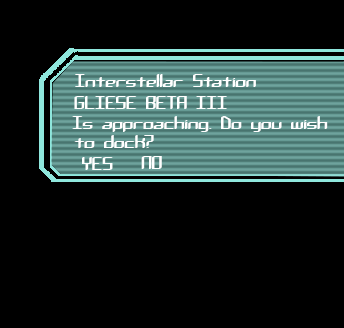
<style>
.page{position:relative;width:344px;height:328px;background:#000000}
.page>*{position:absolute;margin:0}
.t1{font:18px "ChemicalReactionABRK";color:#ffffff}
</style>
<div class="page">
<p class="t1" style="left:75px;top:74px;width:181px;height:13px">Interstellar Station</p>
<p class="t1" style="left:74px;top:96px;width:153px;height:13px">GLIESE BETA III</p>
<p class="t1" style="left:72px;top:116px;width:256px;height:16px">Is approaching. Do you wish</p>
<p class="t1" style="left:74px;top:135px;width:80px;height:14px">to dock?</p>
<p class="t1" style="left:82px;top:157px;width:31px;height:13px">YES</p>
<p class="t1" style="left:141px;top:156px;width:21px;height:13px">NO</p>
</div>
